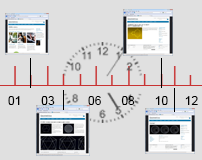
<style>
.page{position:relative;width:202px;height:160px;background:#e0e0e0}
.page>*{position:absolute;margin:0}
.t1{font:12px "ArialMT";color:#000000}
</style>
<div class="page">
<p class="t1" style="left:8px;top:96px;width:190px;height:9px">01      03          06      08      10     12</p>
</div>
